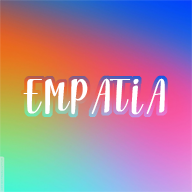
<style>
.page{position:relative;width:192px;height:192px}
.page>*{position:absolute;margin:0}
.t1{font:33.3px "Delicious-Adventures";letter-spacing:0.1em;color:#ffffff}
</style>
<div class="page">
<p class="t1" style="left:23px;top:78px;width:142px;height:37px">EMPATIA</p>
</div>
